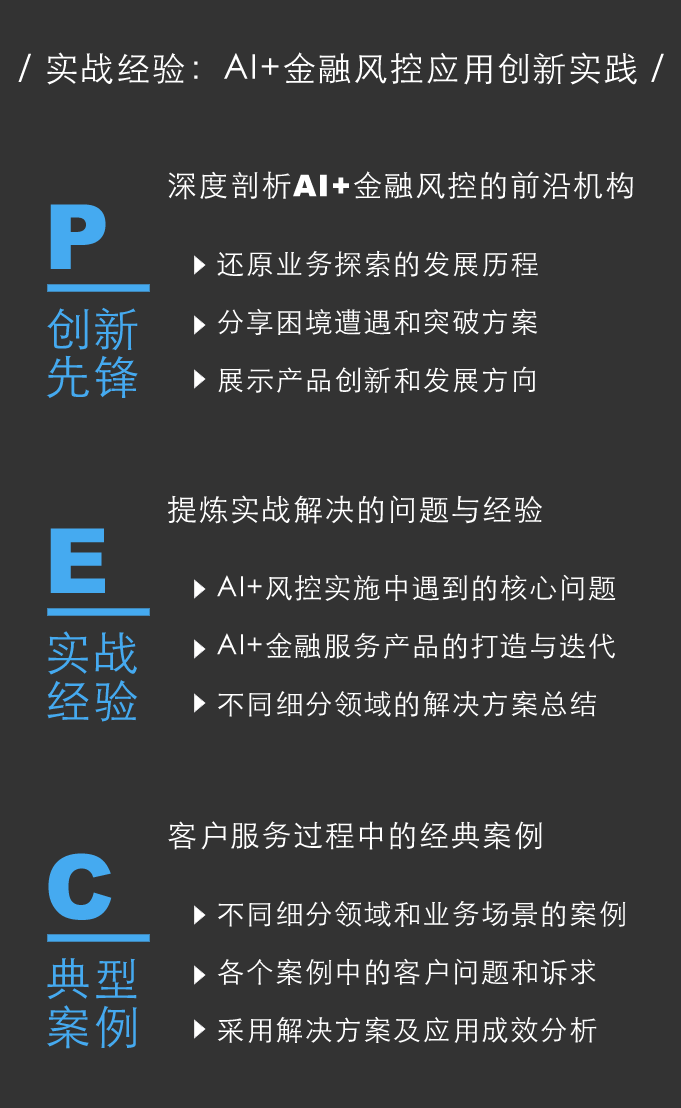
<style>
.page{position:relative;width:681px;height:1108px;background:#333333}
.page>*{position:absolute;margin:0}
.t1{font:34px "STHeitiSC-Light";letter-spacing:0.05em;color:#ffffff}
.t2{font:30px "STHeitiSC-Light";letter-spacing:0.05em;color:#ffffff}
.t3{font:30px "Arial-Black";letter-spacing:0.05em;color:#ffffff}
.t4{font:90px "Arial-Black";letter-spacing:0.05em;color:#45aaf0}
.t5{font:28px/58px "STHeitiSC-Light";letter-spacing:0.05em;color:#ffffff}
.t6{font:46px/48px "STHeitiSC-Light";letter-spacing:0.05em;color:#45aaf0}
</style>
<div class="page">
<p class="t1" style="left:18px;top:52px;width:646px;height:33px">/ 实战经验：AI+金融风控应用创新实践 /</p>
<p class="t2" style="left:168px;top:171px;width:465px;height:29px">深度剖析<span class="t3">AI+</span>金融风控的前沿机构</p>
<p class="t4" style="left:50px;top:204px;width:56px;height:65px">P</p>
<p class="t5" style="left:217px;top:250px;width:321px;height:143px">还原业务探索的发展历程<br>分享困境遭遇和突破方案<br>展示产品创新和发展方向</p>
<p class="t6" style="left:46px;top:307px;width:92px;height:91px">创新<br>先锋</p>
<p class="t2" style="left:168px;top:495px;width:374px;height:29px">提炼实战解决的问题与经验</p>
<p class="t4" style="left:50px;top:528px;width:55px;height:65px">E</p>
<p class="t5" style="left:217px;top:574px;width:399px;height:143px">AI+风控实施中遇到的核心问题<br>AI+金融服务产品的打造与迭代<br>不同细分领域的解决方案总结</p>
<p class="t6" style="left:47px;top:631px;width:91px;height:91px">实战<br>经验</p>
<p class="t2" style="left:168px;top:821px;width:374px;height:29px">客户服务过程中的经典案例</p>
<p class="t4" style="left:48px;top:853px;width:64px;height:67px">C</p>
<p class="t5" style="left:217px;top:900px;width:409px;height:143px">不同细分领域和业务场景的案例<br>各个案例中的客户问题和诉求<br>采用解决方案及应用成效分析</p>
<p class="t6" style="left:47px;top:958px;width:90px;height:91px">典型<br>案例</p>
</div>
